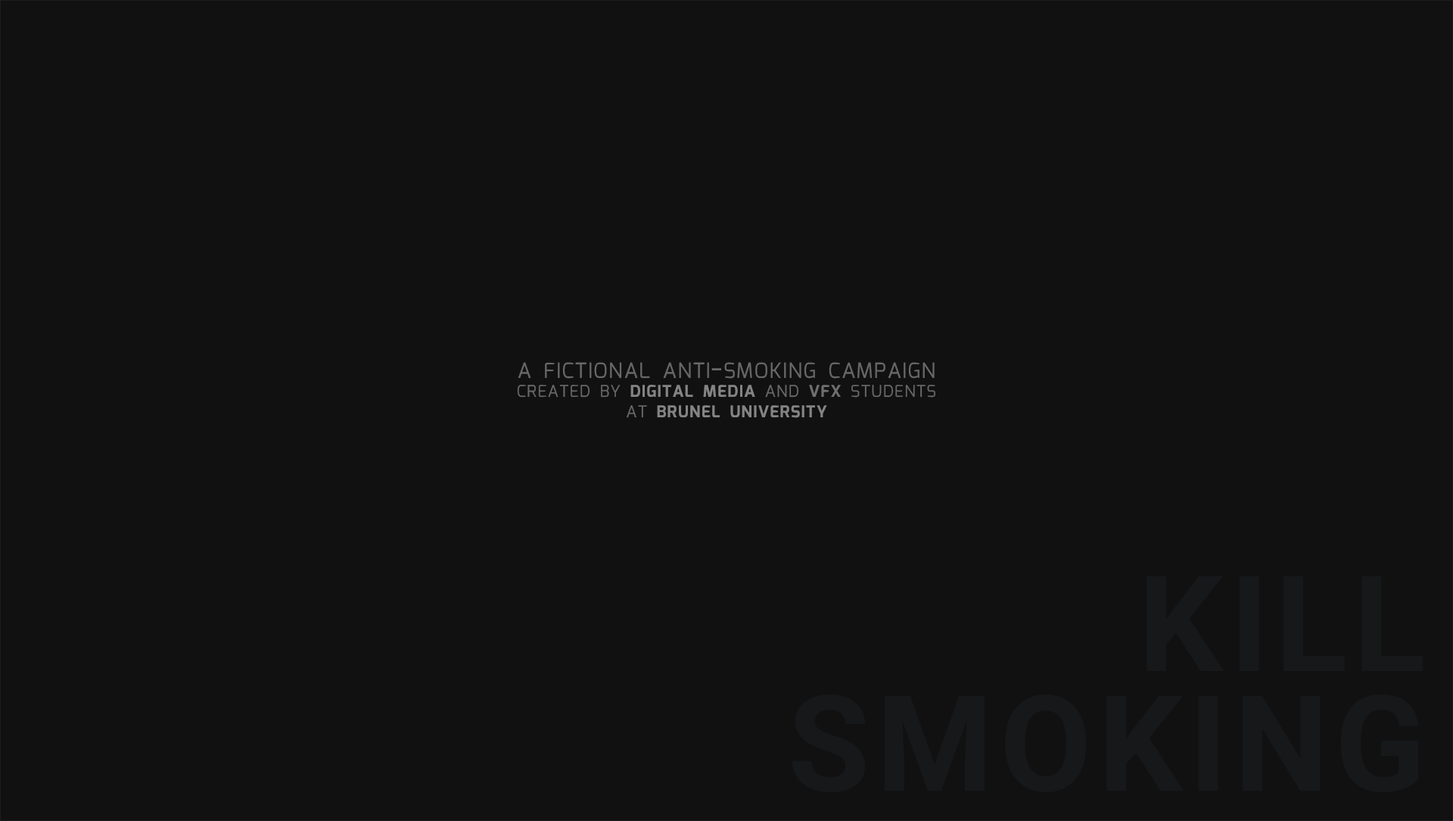
<style>
.page{position:relative;width:1453px;height:821px;background:#111112}
.page>*{position:absolute;margin:0}
.t1{font:29.7px "Mina-Regular";letter-spacing:0.05em;color:#686868;font-variant:small-caps}
.t2{font:23.3px "Mina-Bold";letter-spacing:0.05em;color:#858484;font-variant:small-caps}
.t3{font:23.3px "Mina-Regular";letter-spacing:0.05em;color:#686868;font-variant:small-caps}
.t4{font:23.3px "Mina-Bold";letter-spacing:0.05em;color:#706f6f;font-variant:small-caps}
.t5{font:132.9px/119.1px "Roboto-Bold";letter-spacing:0.05em;color:#16181a;font-variant:small-caps}
</style>
<div class="page">
<p class="t1" style="left:518px;top:362px;width:417px;height:16px">a fictional anti-smoking campaign</p>
<p class="t2" style="left:517px;top:384px;width:419px;height:13px"><span class="t3">created by </span>digital media<span class="t3"> and </span><span class="t4">vfx</span><span class="t3"> students</span></p>
<p class="t2" style="left:627px;top:405px;width:200px;height:13px"><span class="t3">at </span>brunel university</p>
<p class="t5" style="left:792px;top:576px;width:631px;height:216px;text-align:right">KILL<br>SMOKING</p>
</div>
